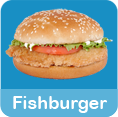
<style>
.page{position:relative;width:118px;height:117px;background:#188fc4}
.page>*{position:absolute;margin:0}
.t1{font:18.1px "ArialRoundedMTBold";color:#ffffff}
</style>
<div class="page">
<p class="t1" style="left:13px;top:96px;width:94px;height:17px">Fishburger</p>
</div>
